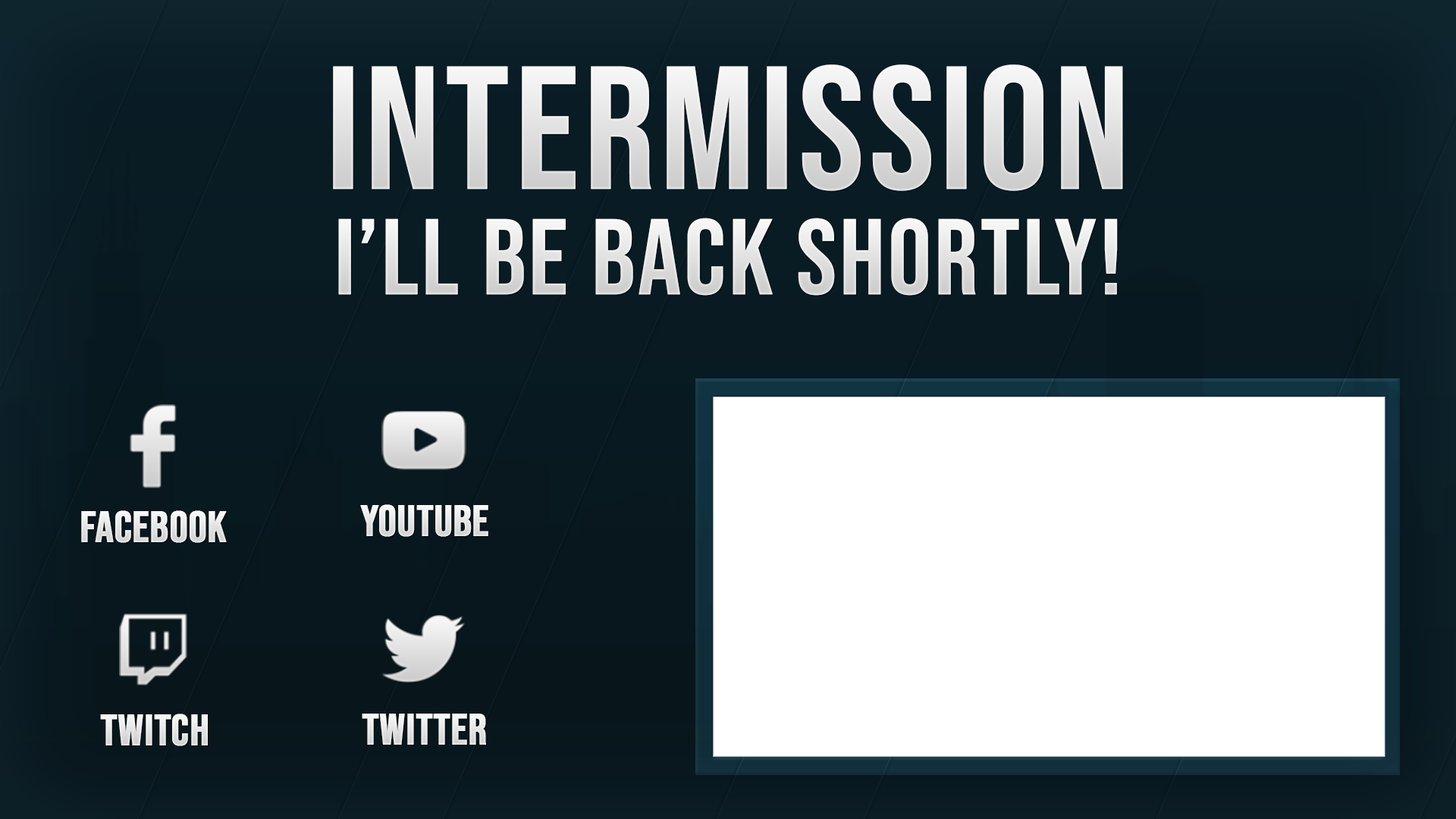
<style>
.page{position:relative;width:1456px;height:819px;background:#ffffff}
.page>*{position:absolute;margin:0}
.t1{font:174.7px "BebasNeue-Regular";color:#e5e5e5;text-transform:uppercase;font-weight:bold}
.t2{font:106.2px "BebasNeue-Regular";color:#e7e7e7;text-transform:uppercase;font-weight:bold}
.t3{font:44.1px "BebasNeue-Regular";color:#ffffff;text-transform:uppercase;font-weight:bold}
</style>
<div class="page">
<p class="t1" style="left:333px;top:64px;width:790px;height:127px">INTERMISSION</p>
<p class="t2" style="left:338px;top:218px;width:780px;height:78px">I’LL BE BACK SHORTLY!</p>
<p class="t3" style="left:360px;top:504px;width:128px;height:33px">YOUTUBE</p>
<p class="t3" style="left:81px;top:510px;width:146px;height:33px">FACEBOOK</p>
<p class="t3" style="left:100px;top:714px;width:108px;height:32px">TWITCH</p>
<p class="t3" style="left:362px;top:714px;width:124px;height:31px">TWITTER</p>
</div>
